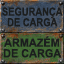
<style>
.page{position:relative;width:64px;height:64px}
.page>*{position:absolute;margin:0}
.t1{font:11.3px/10.7px "Arial-BoldMT";color:#1c1e1e;text-transform:uppercase;scale:0.83 1}
.t2{font:11.3px/10.7px "Arial-BoldMT";color:#1c1e1e;text-transform:uppercase;scale:0.96 1}
</style>
<div class="page">
<p class="t1" style="left:2px;top:7px;width:61px;height:20px;text-align:center">Segurança<br>de CARGA</p>
<p class="t2" style="left:3px;top:36px;width:59px;height:22px;text-align:center">Armazém<br>de carga</p>
</div>
